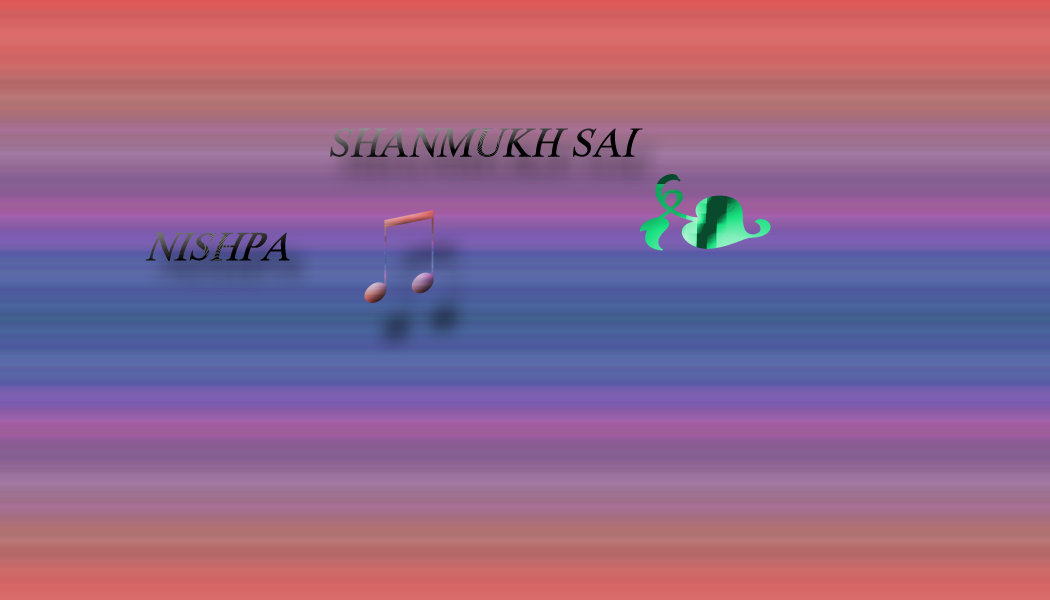
<style>
.page{position:relative;width:1050px;height:600px}
.page>*{position:absolute;margin:0}
.t1{font:50px "Aparajita"}
.t2{font:50px "DaunPenh"}
</style>
<div class="page">
<p class="t1" style="left:330px;top:128px;width:313px;height:30px;text-align:center">SHANMUKH SAI<br><span class="t2"><br>SA<br> SA SAI</span></p>
<p class="t1" style="left:145px;top:232px;width:145px;height:29px">NISHPA</p>
</div>
